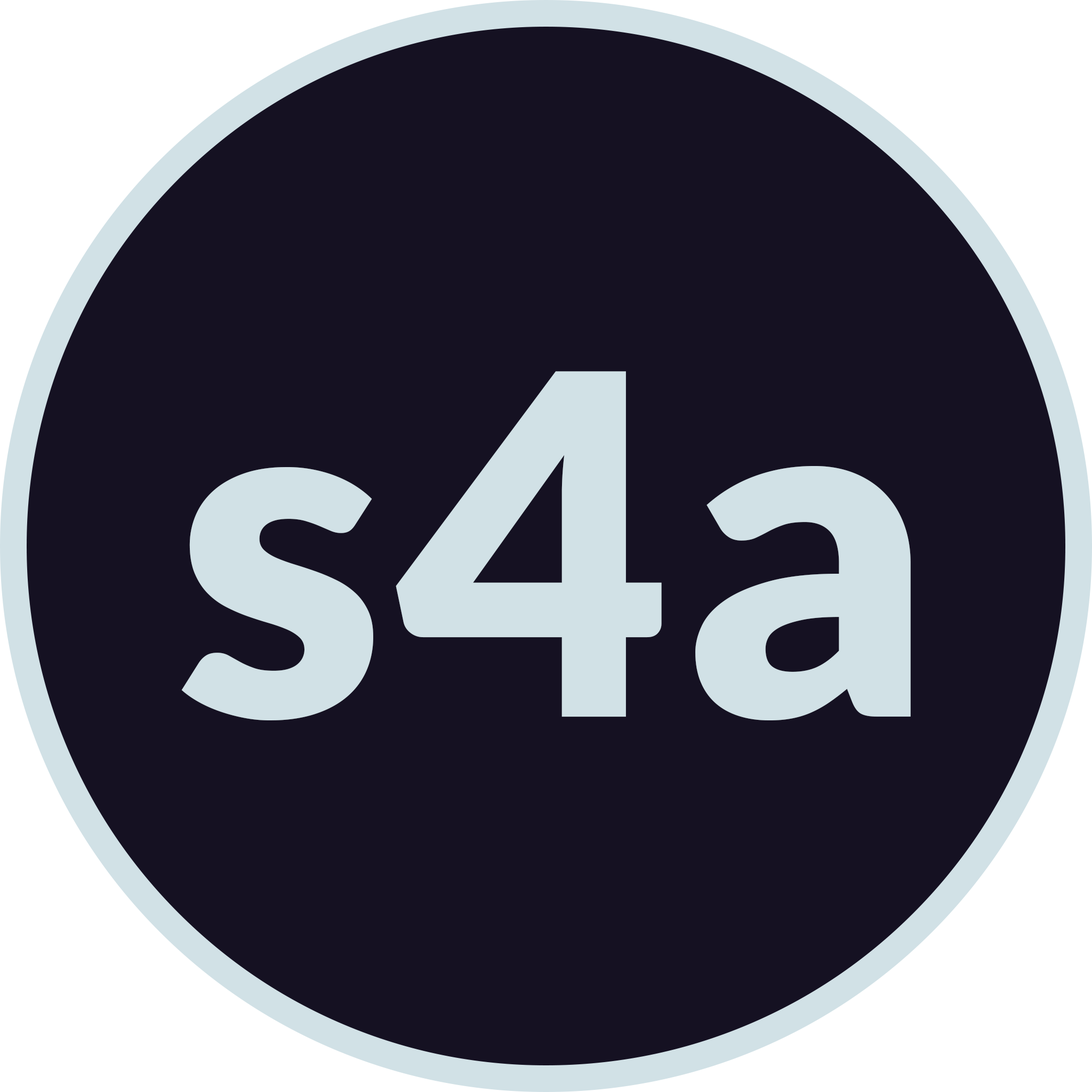
<style>
.page{position:relative;width:1092px;height:1092px;background:#151122}
.page>*{position:absolute;margin:0}
.t1{font:473.7px "Lato-Black";letter-spacing:0.02em;color:#d1e1e6}
</style>
<div class="page">
<p class="t1" style="left:181px;top:371px;width:730px;height:349px">s4a</p>
</div>
